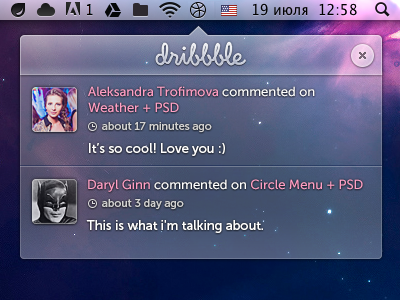
<style>
.page{position:relative;width:400px;height:300px}
.page>*{position:absolute;margin:0}
.t1{font:13px/18px "MuseoSans-500";color:#ff9fc5}
.t2{font:13px/16px "MuseoSans-500";color:#ff9fc5}
.t3{font:11px "MuseoSans-500";color:#d3d3d3}
.t4{font:13px "MuseoSans-500";color:#ffffff}
.t5{font:13px "MuseoSans-500";color:#ffa1c6}
</style>
<div class="page">
<p class="t1" style="left:88px;top:86px;width:227px;height:27px">Aleksandra Trofimova commented on  <br><span class="t2">Weather + PSD</span></p>
<p class="t3" style="left:102px;top:122px;width:110px;height:11px">about 17 minutes ago</p>
<p class="t4" style="left:89px;top:143px;width:136px;height:13px">It’s so cool! Love you :)</p>
<p class="t5" style="left:88px;top:179px;width:275px;height:13px">Daryl Ginn commented on Circle Menu + PSD</p>
<p class="t3" style="left:102px;top:199px;width:82px;height:11px">about 3 day ago</p>
<p class="t4" style="left:86px;top:220px;width:177px;height:13px">This is what i'm talking about.</p>
</div>
